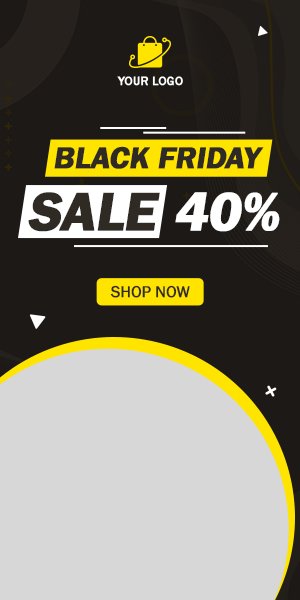
<style>
.page{position:relative;width:300px;height:600px;background:#d7d7d7}
.page>*{position:absolute;margin:0}
.t1{font:12.4px "FranklinGothic-Medium";color:#ffffff;font-weight:bold}
.t2{font:31.7px "FranklinGothic-Demi";letter-spacing:-0.015em;color:#302a24;font-weight:bold}
.t3{font:56.4px "FranklinGothic-Demi";letter-spacing:-0.015em;color:#302a24;font-weight:bold}
.t4{font:56.4px "FranklinGothic-Demi";letter-spacing:-0.015em;color:#ffffff;font-weight:bold}
.t5{font:16.4px "FranklinGothic-Book";letter-spacing:-0.015em;color:#302a24;font-weight:bold}
</style>
<div class="page">
<p class="t1" style="left:117px;top:76px;width:66px;height:10px">YOUR LOGO</p>
<p class="t2" style="left:54px;top:146px;width:210px;height:23px">BLACK FRIDAY</p>
<p class="t3" style="left:28px;top:192px;width:132px;height:40px">SALE</p>
<p class="t4" style="left:175px;top:192px;width:105px;height:40px">40%</p>
<p class="t5" style="left:110px;top:285px;width:80px;height:13px">SHOP NOW</p>
</div>
